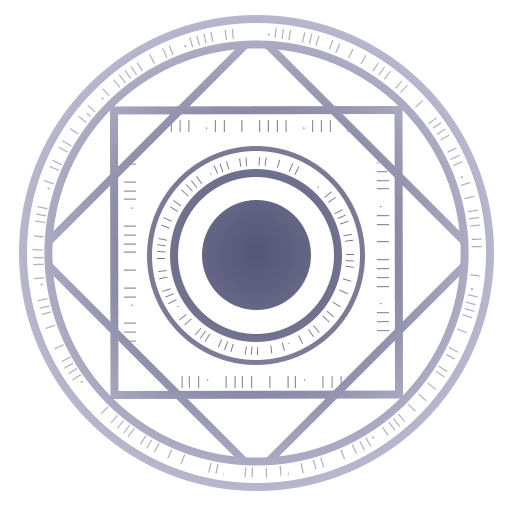
<style>
.page{position:relative;width:512px;height:512px;background:#ffffff}
.page>*{position:absolute;margin:0}
.t1{font:15.7px "Courier"}
</style>
<div class="page">
<p class="t1" style="left:126px;top:120px;width:249px;height:12px">|| .|||| .|| | |||| .||| || | || | || .|</p>
<p class="t1" style="left:123px;top:137px;width:14px;height:249px;rotate:-90deg">|| .|||| .|| | |||| .||| || | || | || .|</p>
<p class="t1" style="left:376px;top:127px;width:14px;height:249px;rotate:90deg">|| .|||| .|| | |||| .||| || | || | || .|</p>
<p class="t1" style="left:135px;top:376px;width:251px;height:12px;rotate:180deg">|| .|||| .|| | |||| .||| || | || | || .|</p>
</div>
